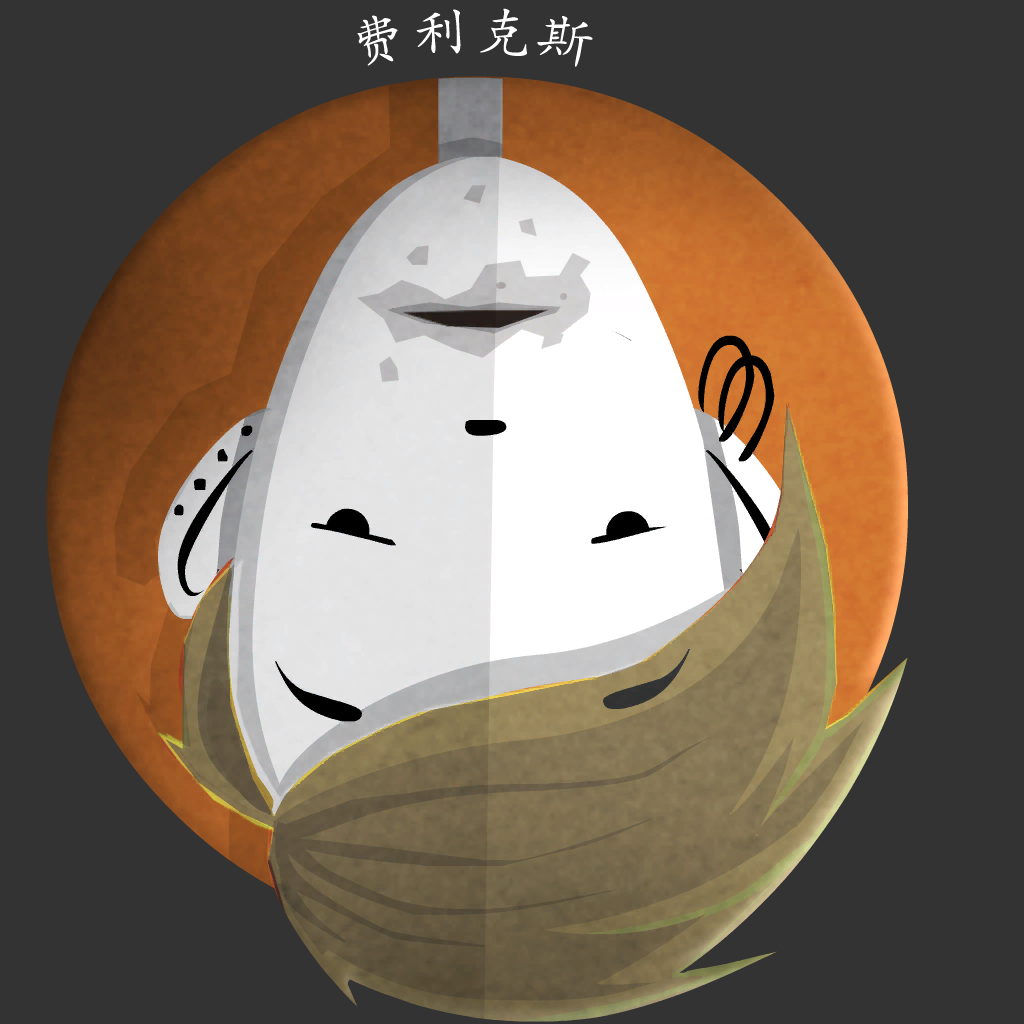
<style>
.page{position:relative;width:1024px;height:1024px;background:#333333}
.page>*{position:absolute;margin:0}
.t1{font:53.3px "STKaiti";letter-spacing:0.1em;color:#ffffff}
</style>
<div class="page">
<p class="t1" style="left:357px;top:8px;width:236px;height:59px">费利克斯</p>
</div>
